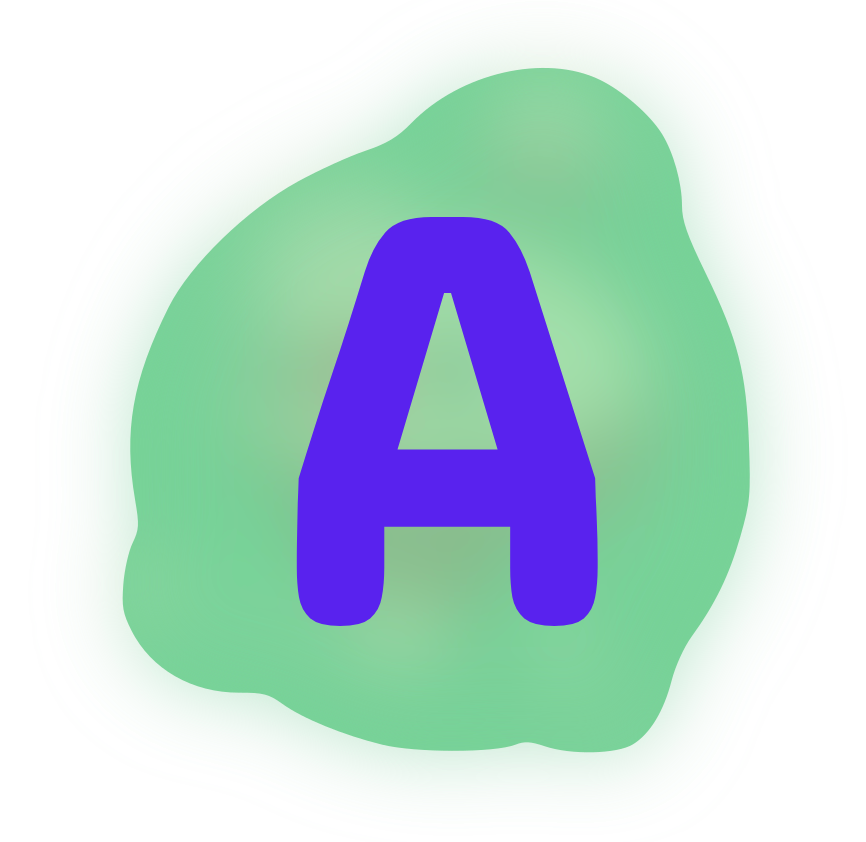
<style>
.page{position:relative;width:866px;height:842px;background:#ffffff}
.page>*{position:absolute;margin:0}
.t1{font:598.4px "Dangrek-Regular";color:#5922ee;scale:1.08 1}
</style>
<div class="page">
<p class="t1" style="left:296px;top:217px;width:302px;height:409px">A</p>
</div>
